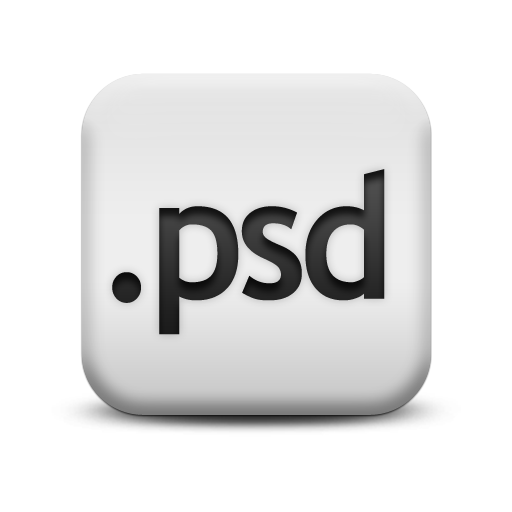
<style>
.page{position:relative;width:512px;height:512px;background:#ffffff}
.page>*{position:absolute;margin:0}
.t1{font:173.1px "TrebuchetMS-Bold";letter-spacing:-0.05em;color:#292929;scale:0.94 1}
</style>
<div class="page">
<p class="t1" style="left:112px;top:169px;width:273px;height:166px">.psd</p>
</div>
